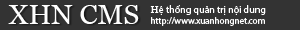
<style>
.page{position:relative;width:300px;height:30px;background:#333333}
.page>*{position:absolute;margin:0}
.t1{font:28px "Vani";color:#ffffff}
.t2{font:10px "MyriadPro-Regular";color:#ffffff}
.t3{font:10px "Vani";color:#ffffff}
.t4{font:9px "MyriadPro-Regular";color:#ffffff}
</style>
<div class="page">
<p class="t1" style="left:8px;top:5px;width:131px;height:19px">XHN CMS</p>
<p class="t2" style="left:150px;top:5px;width:116px;height:10px"><span class="t3">H</span>ệ thống quản trị nội dung</p>
<p class="t4" style="left:151px;top:17px;width:114px;height:9px">http://www.xuanhongnet.com</p>
</div>
